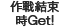
<style>
.page{position:relative;width:67px;height:28px;background:#ffffff}
.page>*{position:absolute;margin:0}
.t1{font:12px/14px "GothicMB101Pr6N-Light";color:#2a2a2a;font-weight:bold}
</style>
<div class="page">
<p class="t1" style="left:10px;top:0px;width:49px;height:27px;text-align:center">作戰結束<br>時Get!</p>
</div>
